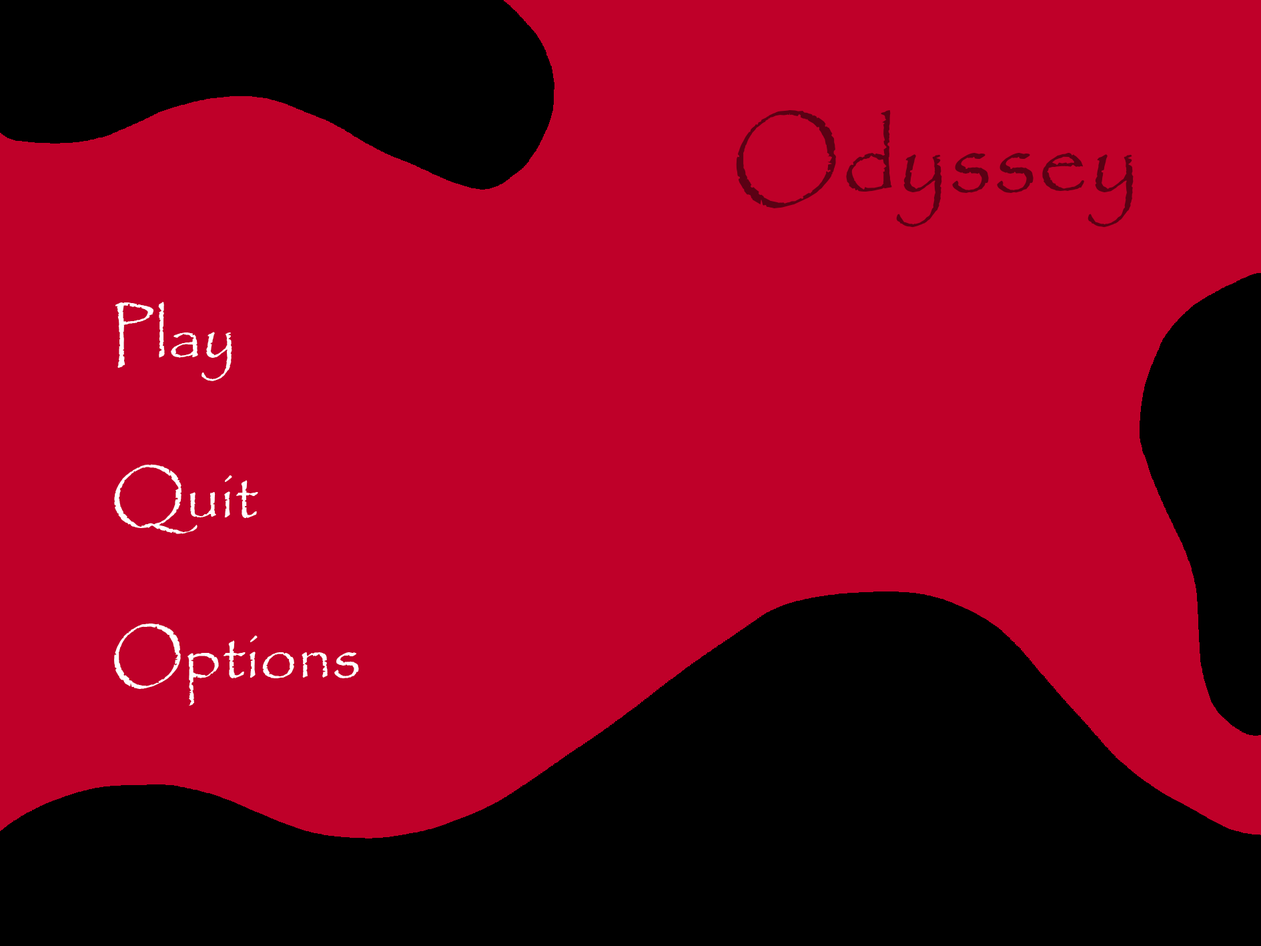
<style>
.page{position:relative;width:1261px;height:946px;background:#bf0029}
.page>*{position:absolute;margin:0}
.t1{font:100.1px "Papyrus-Regular";color:#5a0114}
.t2{font:66.7px "Papyrus-Regular";color:#ffffff}
</style>
<div class="page">
<p class="t1" style="left:736px;top:109px;width:398px;height:119px">Odyssey</p>
<p class="t2" style="left:114px;top:302px;width:245px;height:403px">Play<br><br>Quit<br><br>Options</p>
</div>
